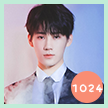
<style>
.page{position:relative;width:108px;height:108px}
.page>*{position:absolute;margin:0}
.t1{font:11px "DFPiPi-W5-WINP-BF";letter-spacing:0.1em;color:#ffffff;font-weight:bold}
</style>
<div class="page">
<p class="t1" style="left:72px;top:84px;width:31px;height:9px">1024</p>
</div>
